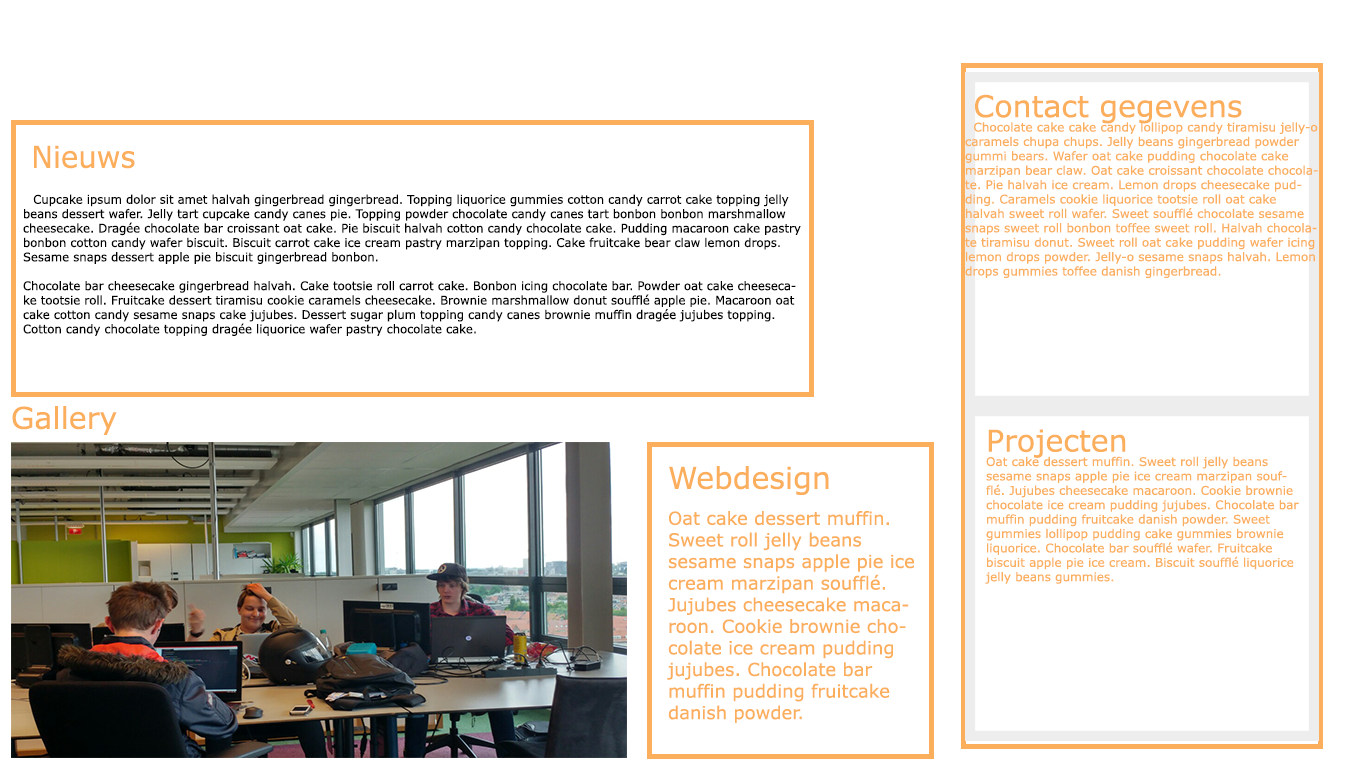
<style>
.page{position:relative;width:1366px;height:768px;background:#ffffff}
.page>*{position:absolute;margin:0}
.t1{font:12px "Verdana";color:#fbaf5d}
.t2{font:30px "Verdana";color:#fbaf5d}
.t3{font:12px "Verdana";color:#000000;scale:0.97 1}
.t4{font:6px "Verdana";color:#cdd7ed;scale:0.97 1}
.t5{font:30px "Verdana";color:#fbaf5d;scale:0.97 1}
.t6{font:18px "Verdana";color:#fbaf5d}
</style>
<div class="page">
<p class="t1" style="left:965px;top:94px;width:353px;height:184px"><span class="t2">Contact gegevens<br></span>  Chocolate cake cake candy lollipop candy tiramisu jelly-o caramels chupa chups. Jelly beans gingerbread powder gummi bears. Wafer oat cake pudding chocolate cake marzipan bear claw. Oat cake croissant chocolate chocolate. Pie halvah ice cream. Lemon drops cheesecake pudding. Caramels cookie liquorice tootsie roll oat cake halvah sweet roll wafer. Sweet soufflé chocolate sesame snaps sweet roll bonbon toffee sweet roll. Halvah chocolate tiramisu donut. Sweet roll oat cake pudding wafer icing lemon drops powder. Jelly-o sesame snaps halvah. Lemon drops gummies toffee danish gingerbread.</p>
<p class="t3" style="left:23px;top:145px;width:778px;height:191px"><span class="t4"><br><br>    </span><span class="t5">Nieuws<br> </span>Cupcake ipsum dolor sit amet halvah gingerbread gingerbread. Topping liquorice gummies cotton candy carrot cake topping jelly  beans dessert wafer. Jelly tart cupcake candy canes pie. Topping powder chocolate candy canes tart bonbon bonbon marshmallow cheesecake. Dragée chocolate bar croissant oat cake. Pie biscuit halvah cotton candy chocolate cake. Pudding macaroon cake pastry bonbon cotton candy wafer biscuit. Biscuit carrot cake ice cream pastry marzipan topping. Cake fruitcake bear claw lemon drops. Sesame snaps dessert apple pie biscuit gingerbread bonbon.<br><br>Chocolate bar cheesecake gingerbread halvah. Cake tootsie roll carrot cake. Bonbon icing chocolate bar. Powder oat cake cheesecake tootsie roll. Fruitcake dessert tiramisu cookie caramels cheesecake. Brownie marshmallow donut soufflé apple pie. Macaroon oat cake cotton candy sesame snaps cake jujubes. Dessert sugar plum topping candy canes brownie muffin dragée jujubes topping. Cotton candy chocolate topping dragée liquorice wafer pastry chocolate cake.</p>
<p class="t2" style="left:12px;top:406px;width:105px;height:29px">Gallery</p>
<p class="t1" style="left:985px;top:429px;width:314px;height:155px"><span class="t2">Projecten<br></span>Oat cake dessert muffin. Sweet roll jelly beans sesame snaps apple pie ice cream marzipan soufflé. Jujubes cheesecake macaroon. Cookie brownie chocolate ice cream pudding jujubes. Chocolate bar muffin pudding fruitcake danish powder. Sweet gummies lollipop pudding cake gummies brownie liquorice. Chocolate bar soufflé wafer. Fruitcake biscuit apple pie ice cream. Biscuit soufflé liquorice jelly beans gummies.</p>
<p class="t6" style="left:667px;top:466px;width:247px;height:257px"><span class="t2">Webdesign<br><br></span>Oat cake dessert muffin. Sweet roll jelly beans sesame snaps apple pie ice cream marzipan soufflé. Jujubes cheesecake macaroon. Cookie brownie chocolate ice cream pudding jujubes. Chocolate bar muffin pudding fruitcake danish powder.</p>
</div>
